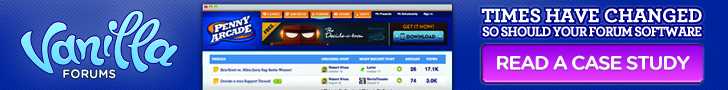
<style>
.page{position:relative;width:728px;height:90px}
.page>*{position:absolute;margin:0}
.t1{font:14px/14px "Archer-BoldLF";letter-spacing:-0.075em;color:#ffffff;font-weight:bold;scale:0.95 1}
.t2{font:20px "Archer-BoldLF";letter-spacing:-0.025em;color:#ffffff;font-weight:bold}
.t3{font:20px "GothamRounded-Bold";letter-spacing:-0.075em;color:#ffffff}
.t4{font:12px "GothamRounded-Bold";color:#f5ffff}
</style>
<div class="page">
<p class="t1" style="left:481px;top:8px;width:221px;height:29px;text-align:center"><span class="t2">TIMES HAVE CHANGED<br></span>SO SHOULD YOUR FORUM SOFTWARE</p>
<p class="t3" style="left:497px;top:55px;width:193px;height:16px">READ A CASE STUDY</p>
<p class="t4" style="left:63px;top:69px;width:53px;height:10px">FORUMS</p>
</div>
